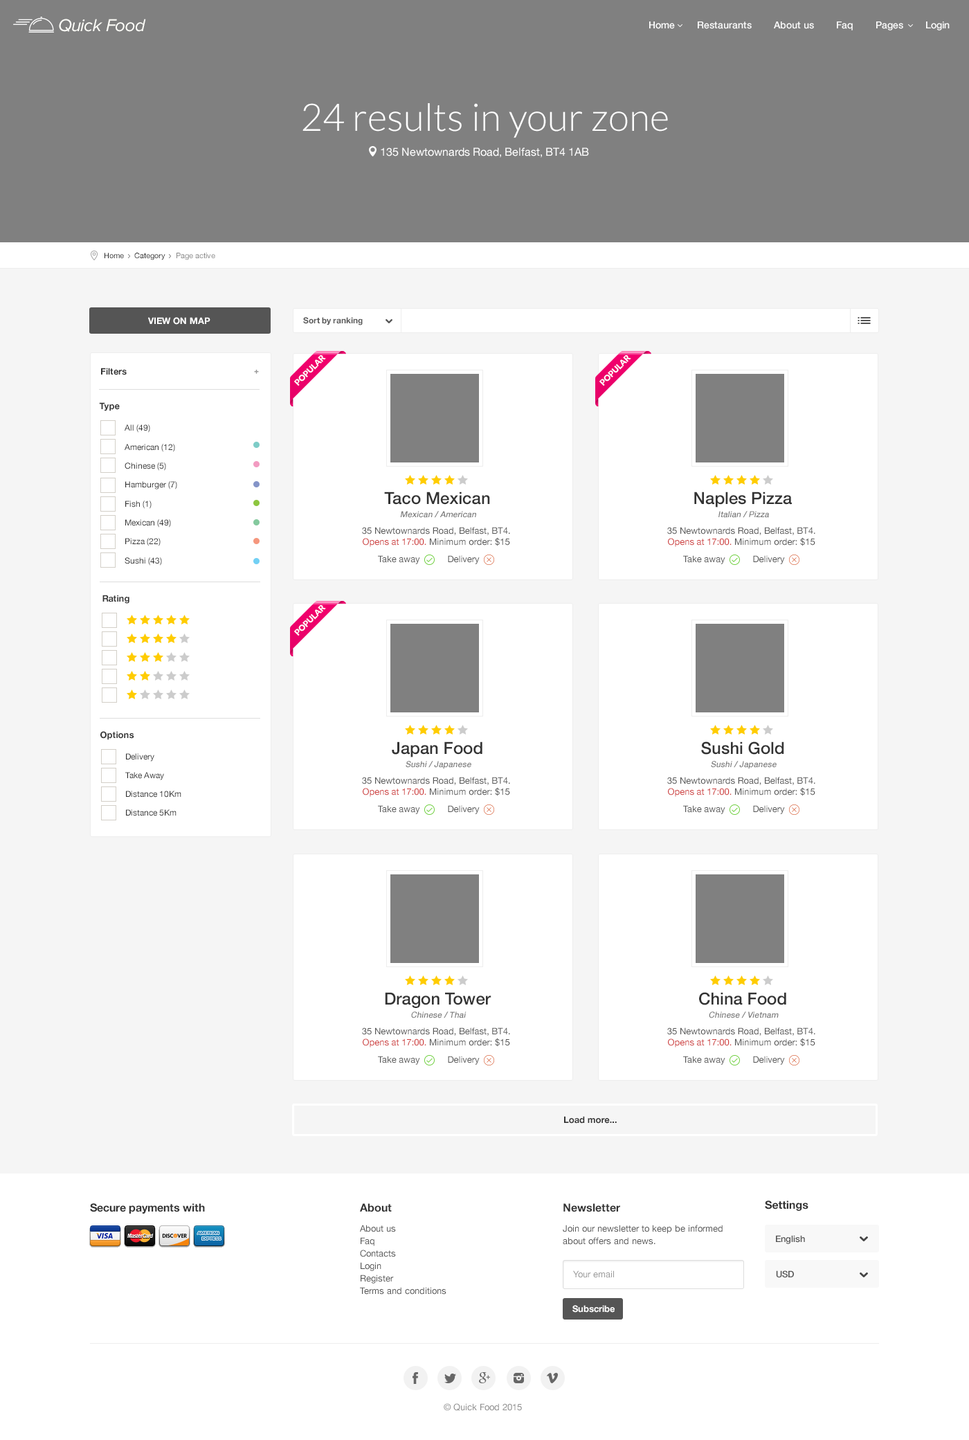
<style>
.page{position:relative;width:969px;height:1440px;background:#ffffff}
.page>*{position:absolute;margin:0}
.t1{font:18px "ProximaNova-RegularIt";letter-spacing:-0.025em;color:#fefef9}
.t2{font:9.7px "HelveticaNeue-Medium";color:#ffffff}
.t3{font:11.1px/24.9px "HelveticaNeue";color:#ffffff}
.t4{font:38.1px/16.6px "Lato-Light";color:#ffffff}
.t5{font:7.6px "HelveticaNeue";color:#252525}
.t6{font:7.6px "HelveticaNeue";color:#888888}
.t7{font:9px "HelveticaNeue-Bold";color:#ffffff;text-transform:uppercase}
.t8{font:8.3px "HelveticaNeue-Bold";color:#555555}
.t9{font:9px "HelveticaNeue-Bold";color:#333333}
.t10{font:8.3px "Montserrat-Bold";color:#999999}
.t11{font:8.3px/18.9px "HelveticaNeue";color:#333333}
.t12{font:16.6px "HelveticaNeue-Medium";color:#333333}
.t13{font:8.3px "HelveticaNeue-Medium";color:#777777;font-style:italic}
.t14{font:9px "HelveticaNeue";color:#555555}
.t15{font:9px "HelveticaNeue";color:#ce3b3b}
.t16{font:8.3px/18.7px "HelveticaNeue";color:#333333}
.t17{font:11.1px "HelveticaNeue-Bold";color:#333333}
.t18{font:9px/12.5px "HelveticaNeue";color:#555555}
.t19{font:9px "HelveticaNeue-Medium";color:#555555}
.t20{font:9px "HelveticaNeue";color:#999999}
.t21{font:9px "HelveticaNeue-Bold";color:#ffffff}
.t22{font:9px "HelveticaNeue";color:#8c8c8c}
</style>
<div class="page">
<p class="t1" style="left:59px;top:19px;width:87px;height:13px">Quick Food</p>
<p class="t2" style="left:649px;top:21px;width:301px;height:9px">Home        Restaurants        About us        Faq        Pages        Login</p>
<p class="t3" style="left:303px;top:103px;width:365px;height:55px;text-align:center"><span class="t4">24 results in your zone<br></span>135 Newtownards Road, Belfast, BT4 1AB</p>
<p class="t5" style="left:105px;top:253px;width:110px;height:7px">Home     Category     <span class="t6">Page active</span></p>
<p class="t7" style="left:148px;top:317px;width:62px;height:8px">VIEW ON MAP</p>
<p class="t8" style="left:303px;top:317px;width:60px;height:8px">Sort by ranking</p>
<p class="t9" style="left:101px;top:368px;width:26px;height:7px">Filters</p>
<p class="t10" style="left:254px;top:370px;width:5px;height:4px">+</p>
<p class="t9" style="left:99px;top:402px;width:21px;height:9px">Type</p>
<p class="t11" style="left:125px;top:424px;width:52px;height:142px">All (49)<br>American (12)<br>Chinese (5)<br>Hamburger (7)<br>Fish (1)<br>Mexican (49)<br>Pizza (22)<br>Sushi (43)</p>
<p class="t12" style="left:384px;top:492px;width:106px;height:13px">Taco Mexican</p>
<p class="t12" style="left:694px;top:492px;width:98px;height:15px">Naples Pizza</p>
<p class="t13" style="left:400px;top:511px;width:76px;height:7px">Mexican / American</p>
<p class="t13" style="left:719px;top:511px;width:50px;height:7px">Italian / Pizza</p>
<p class="t14" style="left:362px;top:527px;width:148px;height:20px;text-align:center">35 Newtownards Road, Belfast, BT4. <br><span class="t15">Opens at 17:00. </span>Minimum order: $15</p>
<p class="t14" style="left:667px;top:527px;width:149px;height:20px;text-align:center">35 Newtownards Road, Belfast, BT4. <br><span class="t15">Opens at 17:00. </span>Minimum order: $15</p>
<p class="t14" style="left:378px;top:555px;width:102px;height:9px">Take away           Delivery</p>
<p class="t14" style="left:683px;top:555px;width:102px;height:9px">Take away           Delivery</p>
<p class="t9" style="left:102px;top:595px;width:27px;height:9px">Rating</p>
<p class="t9" style="left:100px;top:731px;width:34px;height:9px">Options</p>
<p class="t12" style="left:392px;top:741px;width:91px;height:16px">Japan Food</p>
<p class="t12" style="left:701px;top:741px;width:83px;height:14px">Sushi Gold</p>
<p class="t16" style="left:125px;top:753px;width:56px;height:63px">Delivery<br>Take Away<br>Distance 10Km<br>Distance 5Km</p>
<p class="t13" style="left:406px;top:761px;width:65px;height:8px">Sushi / Japanese</p>
<p class="t13" style="left:711px;top:761px;width:66px;height:8px">Sushi / Japanese</p>
<p class="t14" style="left:362px;top:777px;width:148px;height:20px;text-align:center">35 Newtownards Road, Belfast, BT4. <br><span class="t15">Opens at 17:00. </span>Minimum order: $15</p>
<p class="t14" style="left:667px;top:777px;width:149px;height:20px;text-align:center">35 Newtownards Road, Belfast, BT4. <br><span class="t15">Opens at 17:00. </span>Minimum order: $15</p>
<p class="t14" style="left:378px;top:805px;width:102px;height:9px">Take away           Delivery</p>
<p class="t14" style="left:683px;top:805px;width:102px;height:9px">Take away           Delivery</p>
<p class="t12" style="left:385px;top:992px;width:107px;height:16px">Dragon Tower</p>
<p class="t12" style="left:699px;top:992px;width:87px;height:13px">China Food</p>
<p class="t13" style="left:411px;top:1011px;width:56px;height:7px">Chinese / Thai</p>
<p class="t13" style="left:709px;top:1011px;width:70px;height:7px">Chinese / Vietnam</p>
<p class="t14" style="left:362px;top:1027px;width:148px;height:20px;text-align:center">35 Newtownards Road, Belfast, BT4. <br><span class="t15">Opens at 17:00. </span>Minimum order: $15</p>
<p class="t14" style="left:667px;top:1027px;width:149px;height:20px;text-align:center">35 Newtownards Road, Belfast, BT4. <br><span class="t15">Opens at 17:00. </span>Minimum order: $15</p>
<p class="t14" style="left:378px;top:1056px;width:102px;height:9px">Take away           Delivery</p>
<p class="t14" style="left:683px;top:1056px;width:102px;height:9px">Take away           Delivery</p>
<p class="t9" style="left:564px;top:1116px;width:53px;height:8px">Load more...</p>
<p class="t17" style="left:90px;top:1203px;width:115px;height:11px">Secure payments with</p>
<p class="t17" style="left:360px;top:1203px;width:32px;height:9px">About</p>
<p class="t17" style="left:564px;top:1203px;width:56px;height:9px">Newsletter</p>
<p class="t17" style="left:765px;top:1200px;width:44px;height:11px">Settings</p>
<p class="t18" style="left:360px;top:1225px;width:87px;height:70px">About us<br>Faq<br>Contacts<br>Login<br>Register<br>Terms and conditions</p>
<p class="t18" style="left:563px;top:1225px;width:160px;height:20px">Join our newsletter to keep be informed about offers and news.</p>
<p class="t19" style="left:776px;top:1235px;width:29px;height:9px">English</p>
<p class="t20" style="left:573px;top:1270px;width:41px;height:8px">Your email</p>
<p class="t19" style="left:776px;top:1270px;width:18px;height:8px">USD</p>
<p class="t21" style="left:573px;top:1305px;width:42px;height:8px">Subscribe</p>
<p class="t22" style="left:444px;top:1403px;width:78px;height:8px">© Quick Food 2015</p>
</div>
